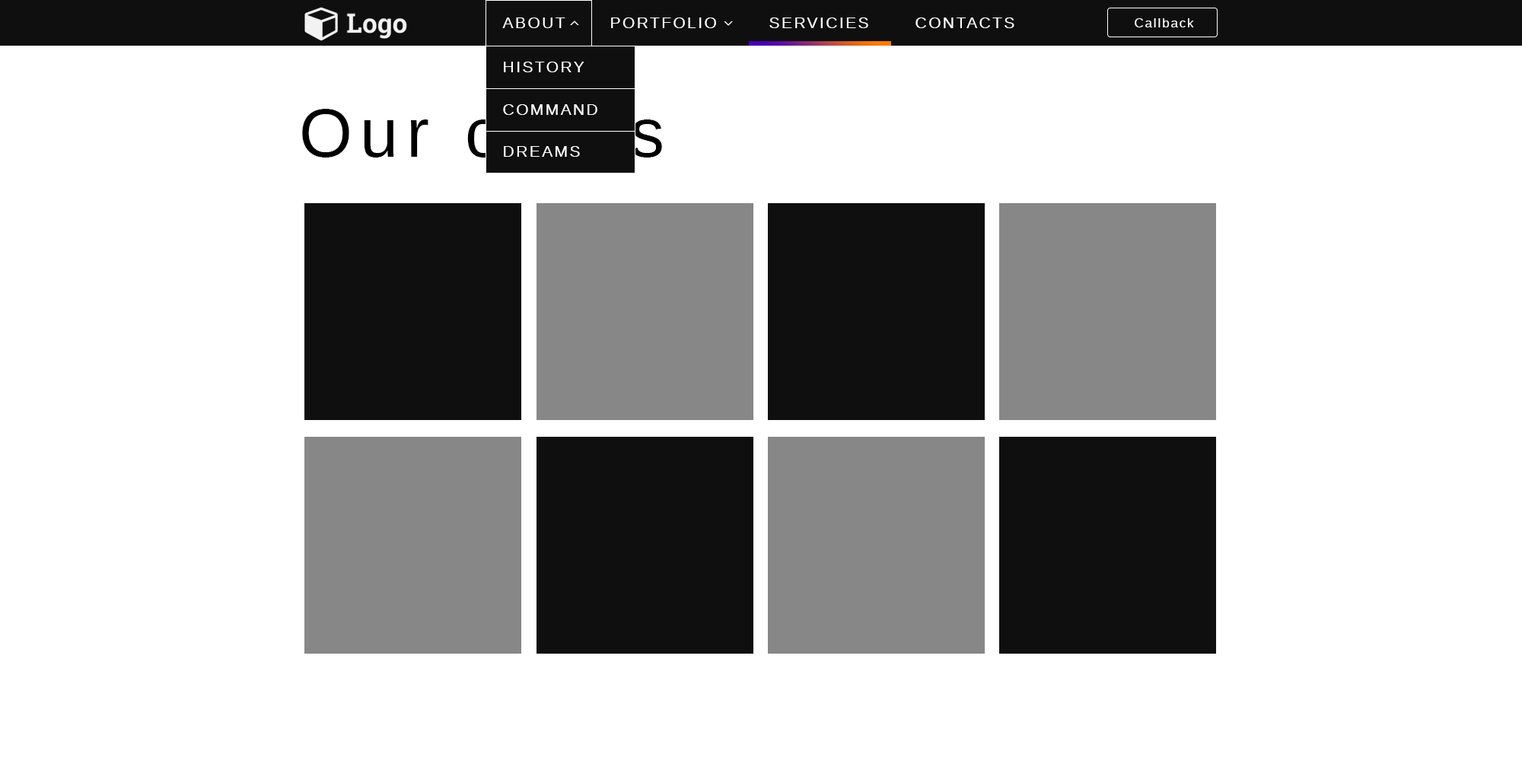
<style>
.page{position:relative;width:1522px;height:783px;background:#ffffff}
.page>*{position:absolute;margin:0}
.t1{font:15.9px "WineArial";letter-spacing:0.12em;color:#ffffff}
.t2{font:12.7px "WineArial";letter-spacing:0.12em;color:#ffffff}
.t3{font:68.4px "WineArial";letter-spacing:0.12em;color:#000000}
</style>
<div class="page">
<p class="t1" style="left:502px;top:18px;width:64px;height:10px">ABOUT</p>
<p class="t1" style="left:611px;top:18px;width:105px;height:10px">PORTFOLIO</p>
<p class="t1" style="left:770px;top:18px;width:99px;height:10px">SERVICIES</p>
<p class="t1" style="left:916px;top:18px;width:99px;height:10px">CONTACTS</p>
<p class="t2" style="left:1135px;top:18px;width:59px;height:9px">Callback</p>
<p class="t1" style="left:504px;top:62px;width:81px;height:10px">HISTORY</p>
<p class="t3" style="left:302px;top:107px;width:360px;height:51px">Our cards</p>
<p class="t1" style="left:503px;top:104px;width:95px;height:11px">COMMAND</p>
<p class="t1" style="left:504px;top:146px;width:76px;height:11px">DREAMS</p>
</div>
